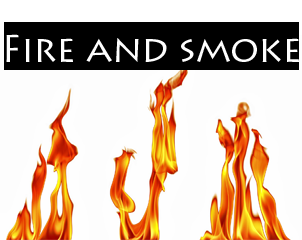
<style>
.page{position:relative;width:302px;height:240px;background:#fdfdfd}
.page>*{position:absolute;margin:0}
.t1{font:37.5px "LithosPro-Regular";letter-spacing:-0.015em;color:#fefefe}
</style>
<div class="page">
<p class="t1" style="left:6px;top:34px;width:293px;height:28px">Fire and smoke</p>
</div>
